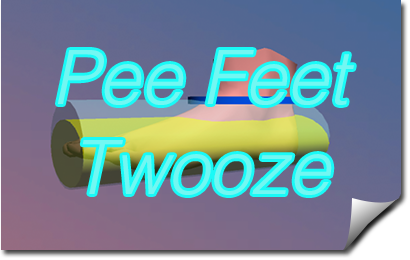
<style>
.page{position:relative;width:410px;height:260px}
.page>*{position:absolute;margin:0}
.t1{font:75px "Helvetica-LightOblique";color:#72f7f2}
</style>
<div class="page">
<p class="t1" style="left:58px;top:50px;width:296px;height:145px;text-align:center">Pee Feet Twooze</p>
</div>
